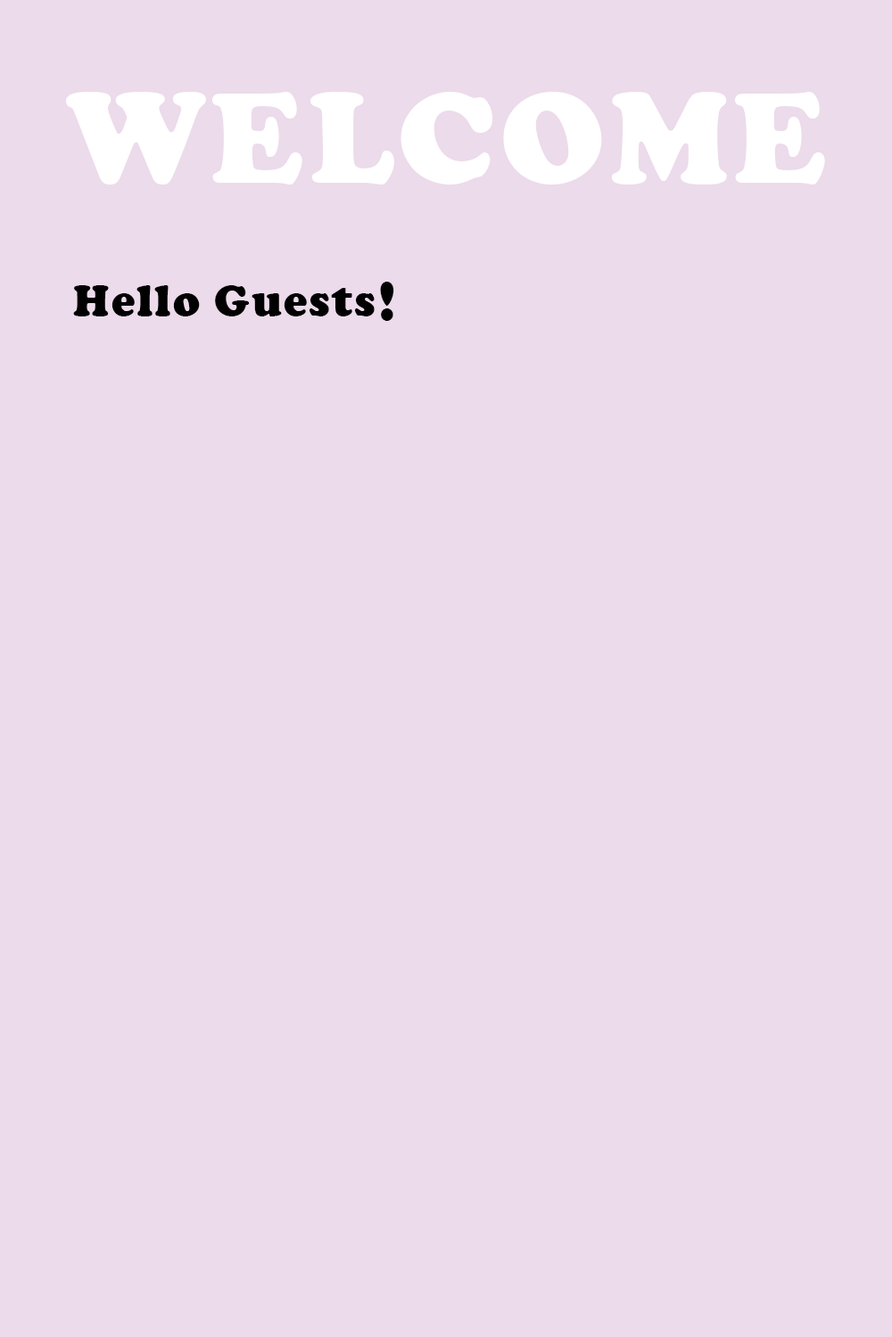
<style>
.page{position:relative;width:892px;height:1337px;background:#ecdbeb}
.page>*{position:absolute;margin:0}
.t1{font:133.7px "CooperBlack";letter-spacing:0.04em;color:#ffffff}
.t2{font:56.8px "CooperBlack";letter-spacing:0.04em;color:#010101}
.t3{font:44.6px "CooperBlack";letter-spacing:0.04em;color:#010101}
</style>
<div class="page">
<p class="t1" style="left:66px;top:92px;width:759px;height:93px">WELCOME</p>
<p class="t2" style="left:380px;top:282px;width:14px;height:39px">!</p>
<p class="t3" style="left:73px;top:285px;width:301px;height:32px">Hello Guests</p>
</div>
